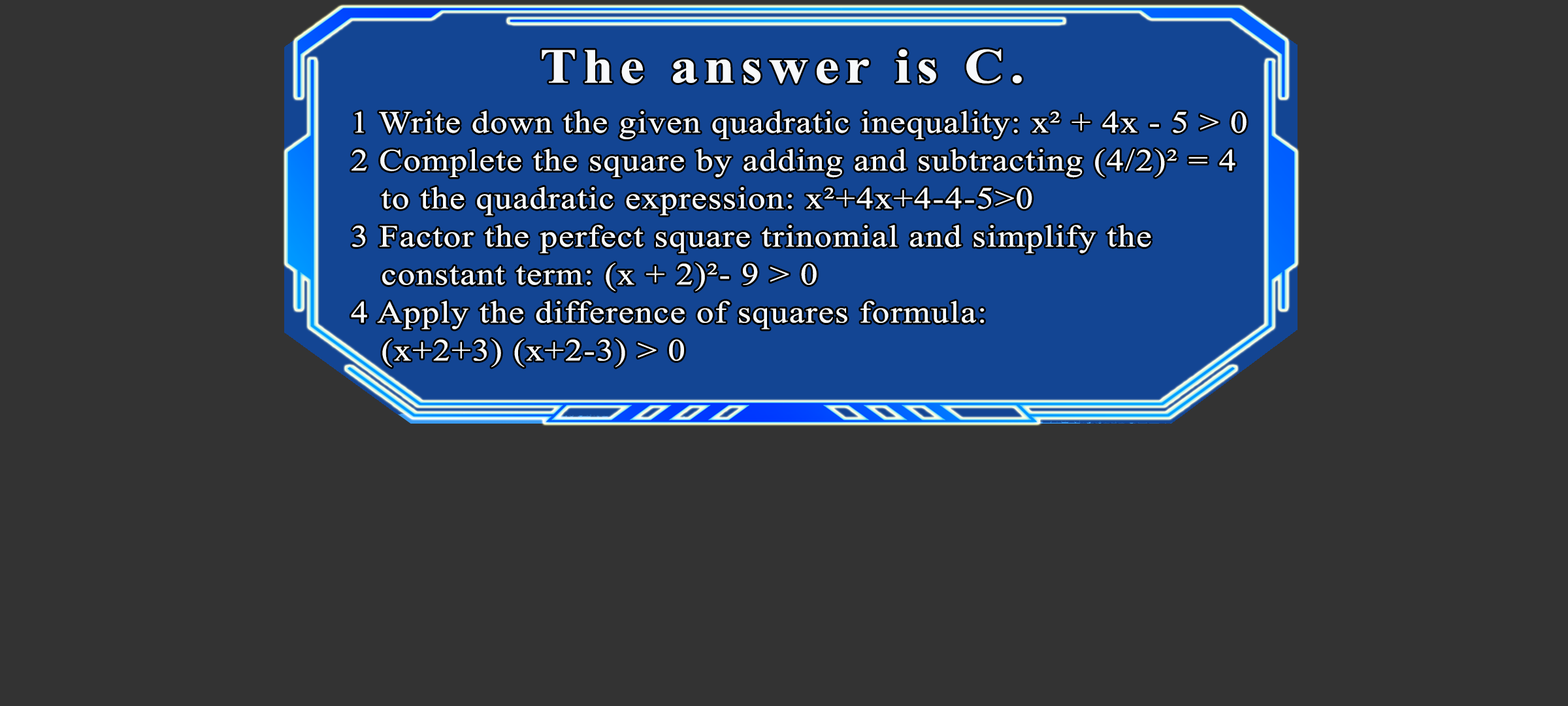
<style>
.page{position:relative;width:1568px;height:706px;background:#333333}
.page>*{position:absolute;margin:0}
.t1{font:49px "TimesNewRomanPS-BoldMT";letter-spacing:0.115em;color:#f7f9fb;scale:1.12 1}
.t2{font:30.9px/38px "TimesNewRomanPSMT";letter-spacing:0.035em;color:#f7f9fb;scale:1.12 1}
</style>
<div class="page">
<p class="t1" style="left:542px;top:49px;width:480px;height:35px">The answer is C.</p>
<p class="t2" style="left:351px;top:110px;width:896px;height:257px">1 Write down the given quadratic inequality: x² + 4x - 5 &gt; 0<br>2 Complete the square by adding and subtracting (4/2)² = 4<br>  to the quadratic expression: x²+4x+4-4-5&gt;0<br>3 Factor the perfect square trinomial and simplify the<br>  constant term: (x + 2)²- 9 &gt; 0<br>4 Apply the difference of squares formula:<br>  (x+2+3) (x+2-3) &gt; 0</p>
</div>
